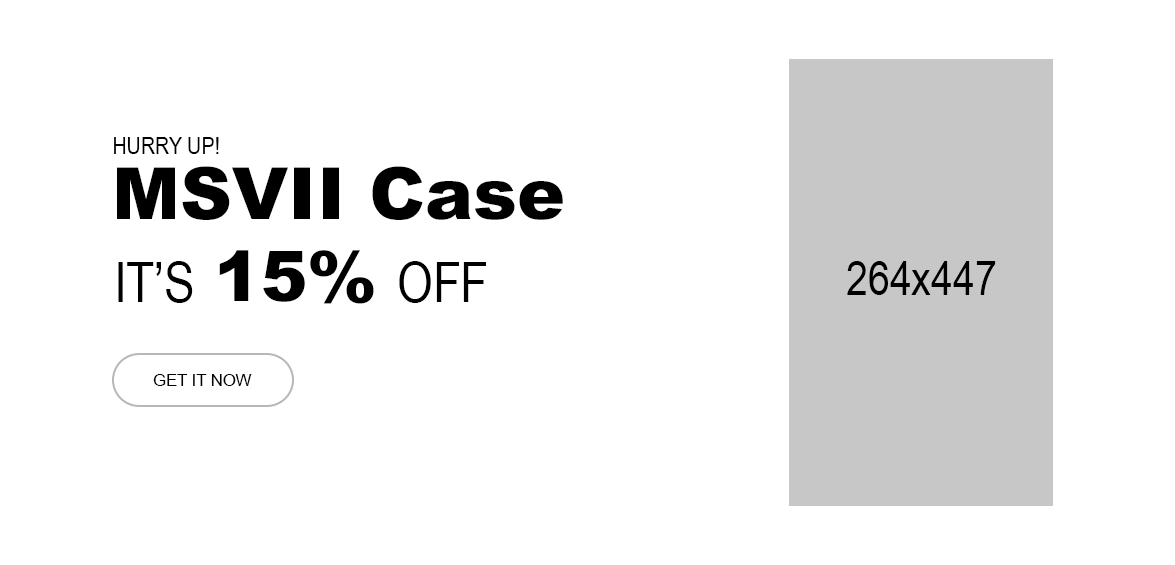
<style>
.page{position:relative;width:1175px;height:565px;background:#ffffff}
.page>*{position:absolute;margin:0}
.t1{font:24px "ArialNarrow";color:#000000}
.t2{font:72px "Arial-Black";color:#000000}
.t3{font:69.7px "Arial-Black";color:#000000}
.t4{font:55.7px "ArialNarrow";color:#000000}
.t5{font:48px "ArialNarrow";color:#000000}
.t6{font:16.5px "ArialMT";color:#000000}
</style>
<div class="page">
<p class="t1" style="left:114px;top:137px;width:105px;height:17px">HURRY UP!</p>
<p class="t2" style="left:117px;top:166px;width:446px;height:54px">MSVII Case</p>
<p class="t3" style="left:219px;top:250px;width:155px;height:54px">15%</p>
<p class="t4" style="left:118px;top:261px;width:75px;height:42px">IT’S</p>
<p class="t4" style="left:399px;top:261px;width:87px;height:42px">OFF</p>
<p class="t5" style="left:847px;top:261px;width:149px;height:34px">264x447</p>
<p class="t6" style="left:153px;top:374px;width:99px;height:12px">GET IT NOW</p>
</div>
